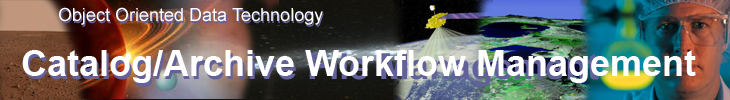
<style>
.page{position:relative;width:730px;height:100px}
.page>*{position:absolute;margin:0}
.t1{font:18px "ArialMT";color:#ffffff}
.t2{font:18px "ArialMT"}
.t3{font:36px "Arial-BoldMT";color:#ffffff}
.t4{font:36px "Arial-BoldMT"}
</style>
<div class="page">
<p class="t1" style="left:59px;top:7px;width:264px;height:18px">Object Oriented Data Technology</p>
<p class="t2" style="left:60px;top:9px;width:264px;height:18px">Object Oriented Data Technology</p>
<p class="t3" style="left:22px;top:50px;width:674px;height:33px">Catalog/Archive Workflow Management</p>
<p class="t4" style="left:24px;top:52px;width:575px;height:35px">Catalog/Archive File Management</p>
</div>
